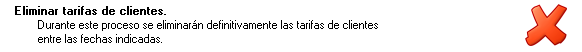
<style>
.page{position:relative;width:582px;height:52px;background:#ffffff}
.page>*{position:absolute;margin:0}
.t1{font:11.4px "MS Sans Serif";color:#000000;font-weight:bold}
.t2{font:11.4px "MS Sans Serif";color:#000000}
</style>
<div class="page">
<p class="t1" style="left:15px;top:6px;width:151px;height:9px">Eliminar tarifas de clientes.</p>
<p class="t2" style="left:38px;top:20px;width:340px;height:23px">Durante este proceso se eliminarán definitivamente las tarifas de clientes<br>entre las fechas indicadas.</p>
</div>
